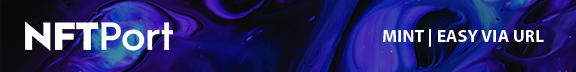
<style>
.page{position:relative;width:576px;height:72px}
.page>*{position:absolute;margin:0}
.t1{font:17.8px "MyriadPro-Bold";color:#ffffff}
</style>
<div class="page">
<p class="t1" style="left:383px;top:29px;width:161px;height:18px">MINT | EASY VIA URL</p>
</div>
